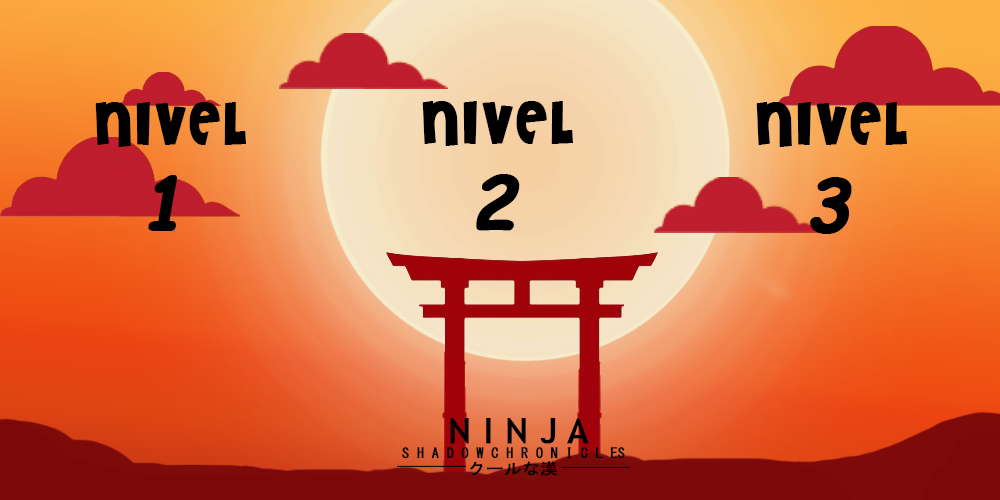
<style>
.page{position:relative;width:1000px;height:500px}
.page>*{position:absolute;margin:0}
.t1{font:60px "Cheri";color:#000000;font-weight:bold}
.t2{font:72px "ComicSansMS-BoldItalic";color:#000000;font-weight:bold}
.t3{font:34.9px "TrebuchetMS";color:#000000;font-weight:bold}
.t4{font:13.9px "MS-Gothic";color:#000000;font-weight:bold}
.t5{font:15.7px "MS-Gothic";color:#000000;font-weight:bold;scale:1.12 1}
.t6{font:4.7px "LucidaBright";color:#000000;font-weight:bold;scale:1.12 1}
</style>
<div class="page">
<p class="t1" style="left:95px;top:102px;width:151px;height:129px;text-align:center">NIVEL<br><span class="t2">1</span></p>
<p class="t1" style="left:422px;top:101px;width:151px;height:130px;text-align:center">NIVEL<br><span class="t2">2</span></p>
<p class="t1" style="left:756px;top:102px;width:151px;height:132px;text-align:center">NIVEL<br><span class="t2">3</span></p>
<p class="t3" style="left:450px;top:418px;width:139px;height:26px">N I N J A</p>
<p class="t4" style="left:402px;top:447px;width:223px;height:12px">S H A D O W C H R O N I C L ES</p>
<p class="t5" style="left:470px;top:461px;width:87px;height:15px"><span class="t6"><br></span><br>クールな漢</p>
</div>
